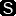
<style>
.page{position:relative;width:16px;height:16px;background:#000000}
.page>*{position:absolute;margin:0}
.t1{font:16px "ArialMT";color:#ffffff}
</style>
<div class="page">
<p class="t1" style="left:3px;top:2px;width:10px;height:12px">S</p>
</div>
